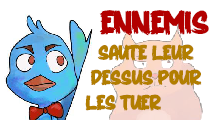
<style>
.page{position:relative;width:215px;height:120px;background:#ffffff}
.page>*{position:absolute;margin:0}
.t1{font:33.3px "THORN";color:#b20000}
.t2{font:20.8px "THORN";color:#b27e00}
.t3{font:25px "THORN";color:#b27e00}
</style>
<div class="page">
<p class="t1" style="left:99px;top:10px;width:110px;height:26px">ennemis</p>
<p class="t2" style="left:85px;top:44px;width:117px;height:67px"><span class="t3">  </span>Saute leur<br> dessus pour<br>les tuer</p>
</div>
